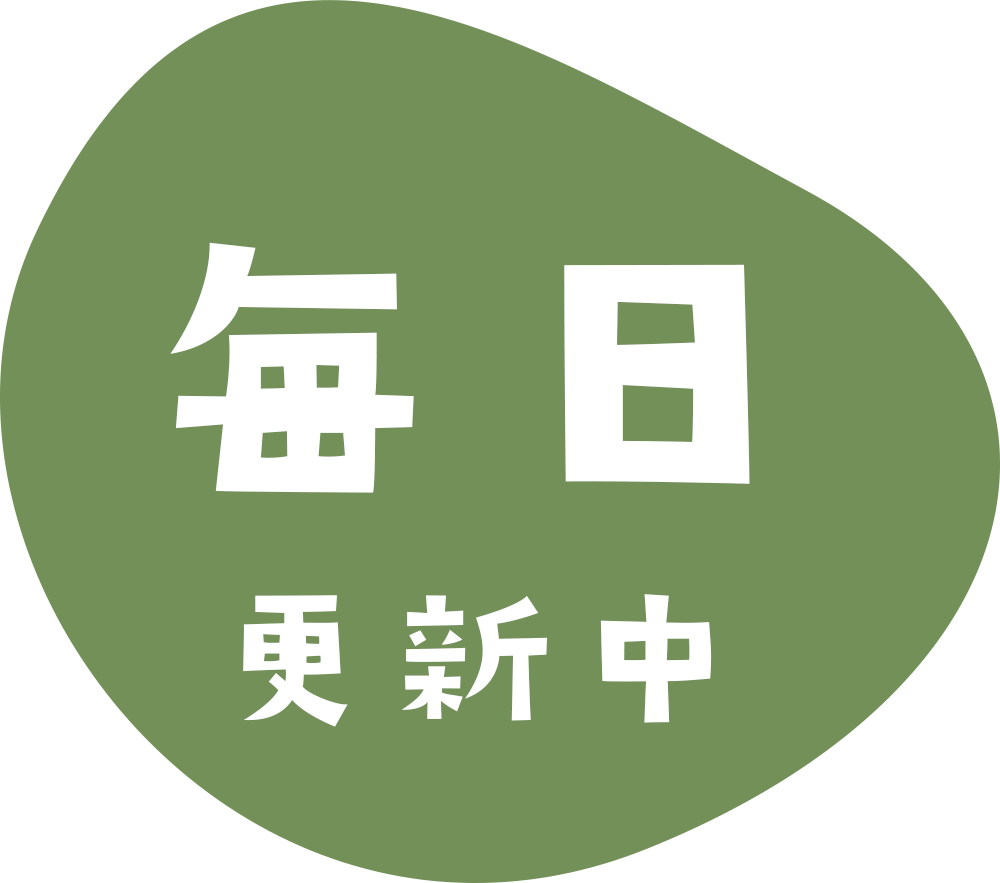
<style>
.page{position:relative;width:1000px;height:883px;background:#739059}
.page>*{position:absolute;margin:0}
.t1{font:169.7px/372.8px "AB-kirigirisu";color:#ffffff;scale:1.07 1}
.t2{font:339.3px/372.8px "AB-kirigirisu";color:#ffffff;scale:1.07 1}
</style>
<div class="page">
<p class="t1" style="left:170px;top:242px;width:580px;height:485px;text-align:center"><span class="t2">毎日<br></span>更新中</p>
</div>
